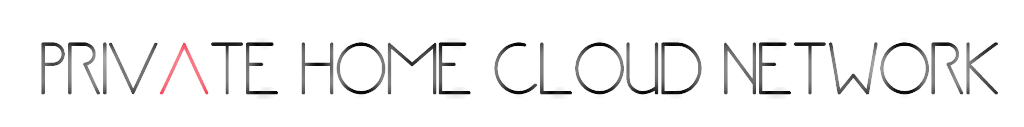
<style>
.page{position:relative;width:1024px;height:127px;background:#ffffff}
.page>*{position:absolute;margin:0}
.t1{font:75px "Abyssopelagic";font-weight:bold}
</style>
<div class="page">
<p class="t1" style="left:41px;top:42px;width:957px;height:53px">private home cloud network</p>
</div>
